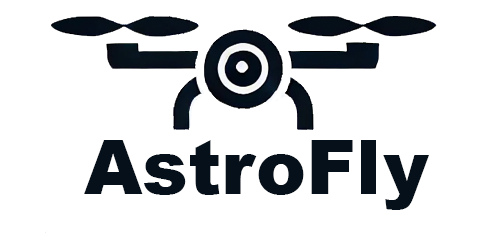
<style>
.page{position:relative;width:499px;height:233px;background:#ffffff}
.page>*{position:absolute;margin:0}
.t1{font:75px "Arial-Black";color:#06101a}
</style>
<div class="page">
<p class="t1" style="left:84px;top:140px;width:345px;height:70px">AstroFly</p>
</div>
